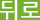
<style>
.page{position:relative;width:40px;height:20px;background:#74af2e}
.page>*{position:absolute;margin:0}
.t1{font:20.8px "MalgunGothic";color:#ffffff;font-weight:bold}
</style>
<div class="page">
<p class="t1" style="left:0px;top:0px;width:41px;height:21px">뒤로</p>
</div>
